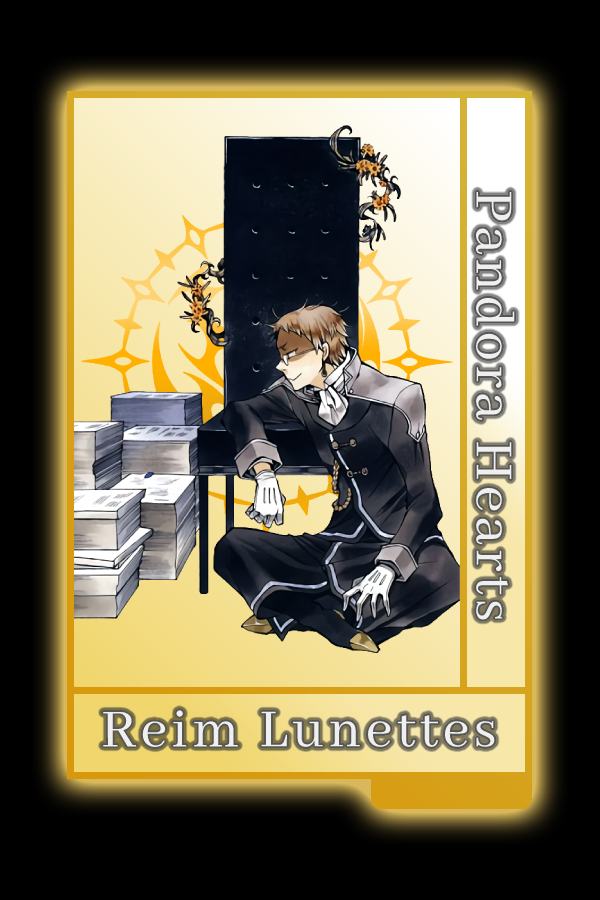
<style>
.page{position:relative;width:600px;height:900px;background:#000000}
.page>*{position:absolute;margin:0}
.t1{font:59.1px "AbhayaLibre-Regular";letter-spacing:0.072em;color:#efefef}
.t2{font:59px "AbhayaLibre-Regular";letter-spacing:0.072em;color:#efefef}
</style>
<div class="page">
<p class="t1" style="left:476px;top:192px;width:39px;height:428px;rotate:90deg">Pandora Hearts</p>
<p class="t2" style="left:103px;top:710px;width:392px;height:38px">Reim Lunettes</p>
</div>
